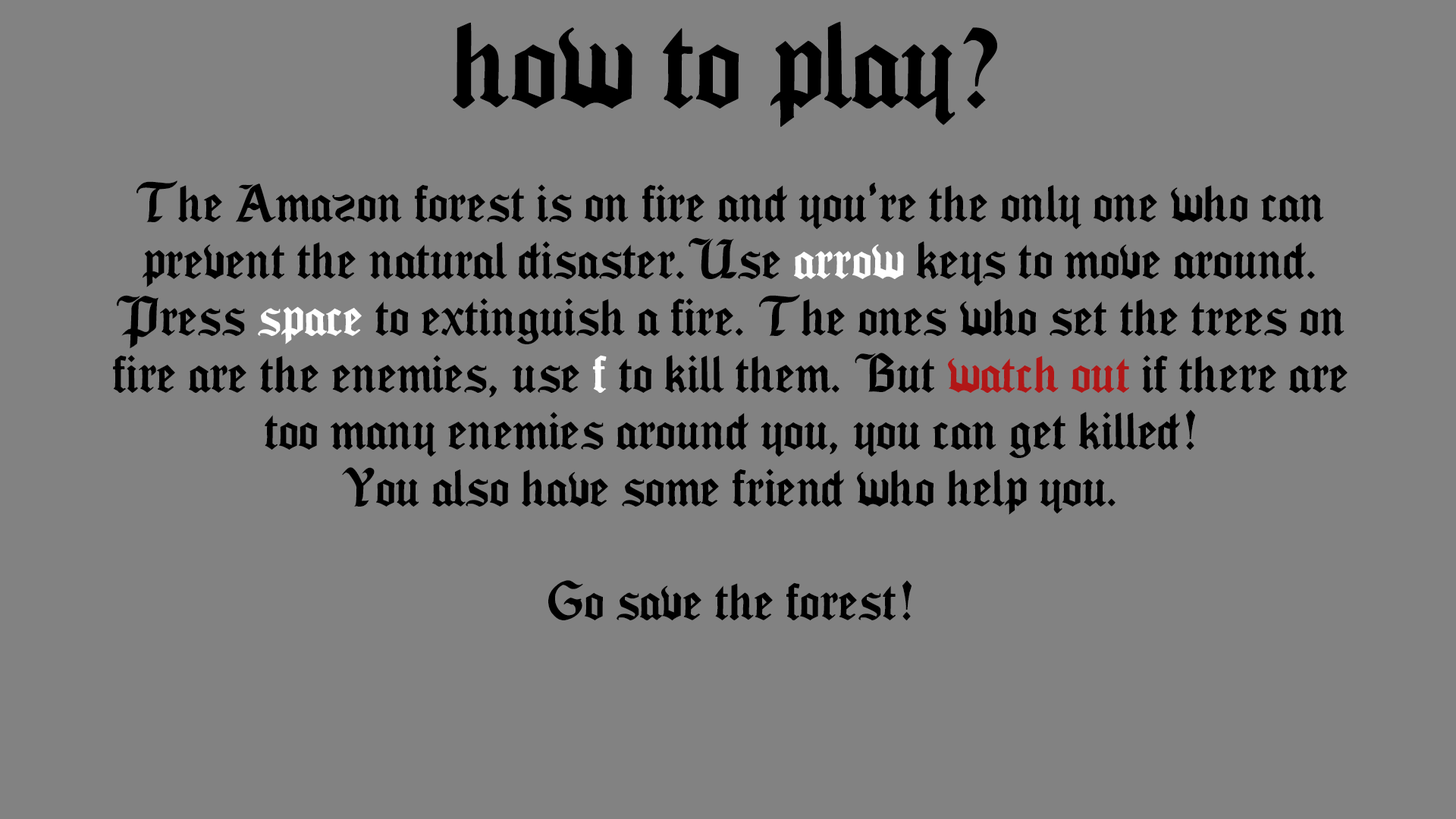
<style>
.page{position:relative;width:1456px;height:819px;background:#828282}
.page>*{position:absolute;margin:0}
.t1{font:110.6px "Seagramtfb";color:#000000}
.t2{font:47.4px "Seagramtfb";color:#000000}
.t3{font:47.4px "Seagramtfb";color:#ffffff}
.t4{font:47.4px "Seagramtfb";color:#b11717}
</style>
<div class="page">
<p class="t1" style="left:453px;top:21px;width:544px;height:106px">how to play?</p>
<p class="t2" style="left:113px;top:180px;width:1235px;height:440px;text-align:center">The Amazon forest is on fire and you‘re the only one who can prevent the natural disaster.Use <span class="t3">arrow</span> keys to move around. Press <span class="t3">space </span>to extinguish a fire. The ones who set the trees on fire are the enemies, use <span class="t3">f</span> to kill them. But <span class="t4">watch out </span>if there are too many enemies around you, you can get killed!<br>You also have some friend who help you.<br><br>Go save the forest!</p>
</div>
